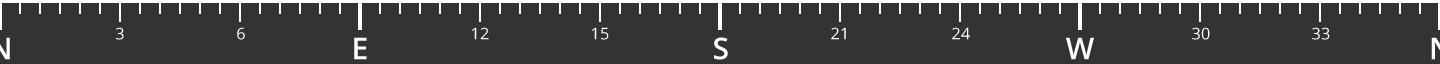
<style>
.page{position:relative;width:1440px;height:64px;background:#333333}
.page>*{position:absolute;margin:0}
.t1{font:16px "OpenSans";letter-spacing:0.02em;color:#ffffff}
.t2{font:30px "OpenSans-Semibold";letter-spacing:0.02em;color:#ffffff}
</style>
<div class="page">
<p class="t1" style="left:116px;top:27px;width:8px;height:13px">3</p>
<p class="t1" style="left:237px;top:27px;width:8px;height:13px">6</p>
<p class="t1" style="left:472px;top:27px;width:17px;height:13px">12</p>
<p class="t1" style="left:592px;top:27px;width:17px;height:13px">15</p>
<p class="t1" style="left:831px;top:27px;width:15px;height:13px">21</p>
<p class="t1" style="left:952px;top:27px;width:18px;height:13px">24</p>
<p class="t1" style="left:1192px;top:27px;width:18px;height:13px">30</p>
<p class="t1" style="left:1312px;top:27px;width:18px;height:13px">33</p>
<p class="t2" style="left:354px;top:37px;width:13px;height:23px">E</p>
<p class="t2" style="left:714px;top:37px;width:14px;height:23px">S</p>
<p class="t2" style="left:1066px;top:37px;width:28px;height:23px">W</p>
</div>
